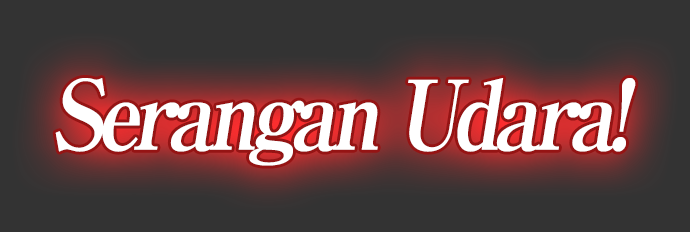
<style>
.page{position:relative;width:690px;height:232px;background:#333333}
.page>*{position:absolute;margin:0}
.t1{font:96px "RyuminPro-ExBold";letter-spacing:-0.08em;color:#ffffff;font-style:italic;scale:0.9 1}
</style>
<div class="page">
<p class="t1" style="left:55px;top:78px;width:581px;height:88px">Serangan Udara!</p>
</div>
